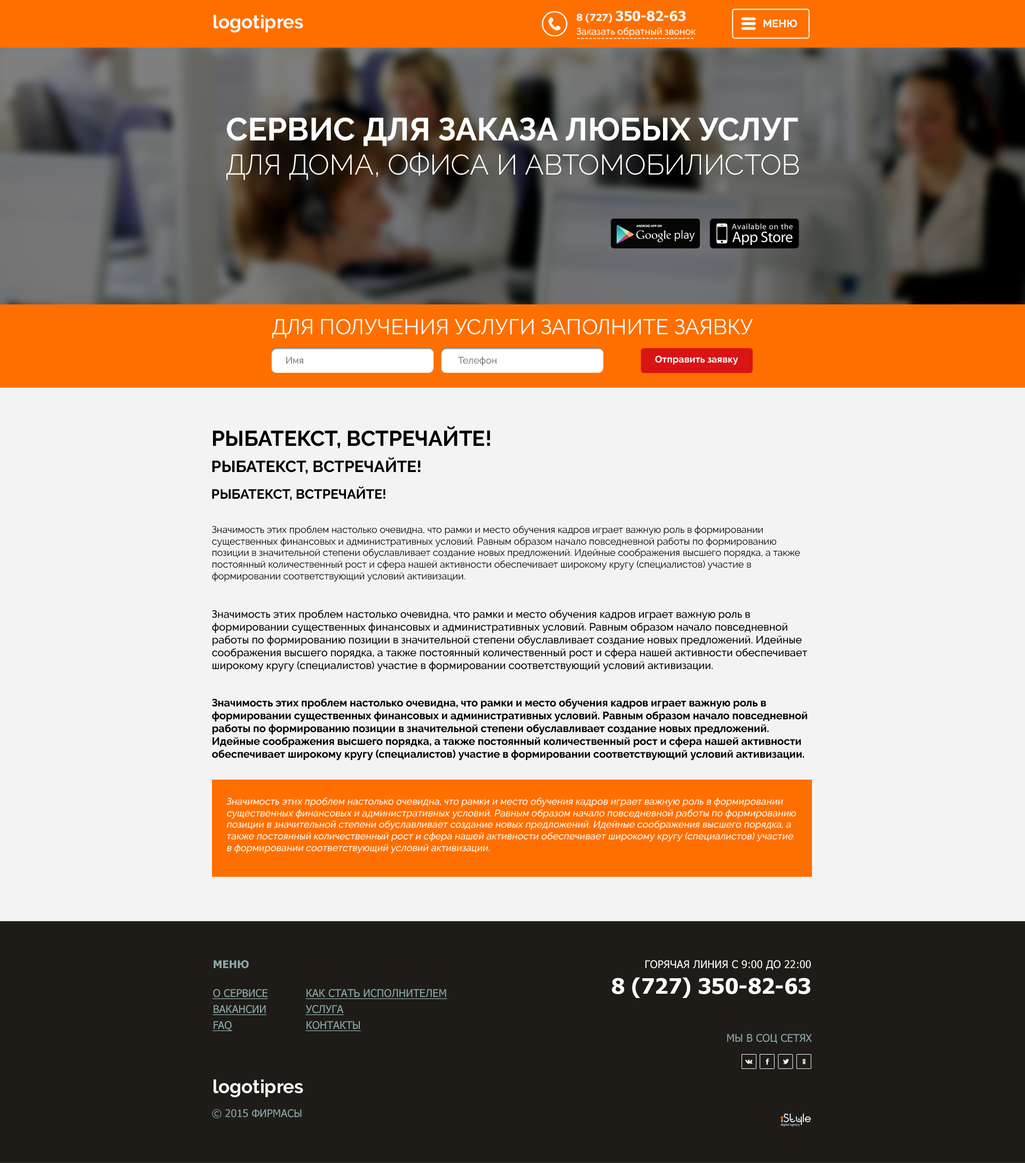
<style>
.page{position:relative;width:1025px;height:1163px;background:#f3f3f3}
.page>*{position:absolute;margin:0}
.t1{font:18.7px "Raleway-Bold";color:#fefefe}
.t2{font:13.3px "Tahoma-Bold";color:#ffffff}
.t3{font:9.6px "Tahoma-Bold";color:#ffffff}
.t4{font:9.6px "Raleway-Medium";color:#ffffff}
.t5{font:10.7px "Raleway-Bold";color:#ffffff;text-transform:uppercase}
.t6{font:9.6px "Raleway-Medium"}
.t7{font:28.3px "Raleway-Light";color:#ffffff;text-transform:uppercase}
.t8{font:32px "Raleway-Bold";color:#ffffff;text-transform:uppercase}
.t9{font:21.4px "Raleway-Regular";color:#ffffff;text-transform:uppercase}
.t10{font:9.6px "Raleway-Medium";color:#808080}
.t11{font:9.6px "Raleway-Bold";color:#ffffff}
.t12{font:21.4px "Raleway-Bold";color:#000000;text-transform:uppercase}
.t13{font:16px "Raleway-Bold";color:#000000;text-transform:uppercase}
.t14{font:13.3px "Raleway-Bold";color:#000000;text-transform:uppercase}
.t15{font:9.6px "Raleway-Regular";color:#000000}
.t16{font:10.7px "Raleway-Medium";color:#000000}
.t17{font:10.7px "Raleway-Bold";color:#000000}
.t18{font:9.6px "Raleway-Medium";color:#ffffff;font-style:italic}
.t19{font:10.7px "Tahoma-Bold";color:#8aa9a9;text-transform:uppercase}
.t20{font:10.7px "Tahoma";color:#ffffff;text-transform:uppercase}
.t21{font:21.4px "Tahoma-Bold";color:#ffffff;text-transform:uppercase}
.t22{font:10.7px/16px "Tahoma";color:#8aa9a9;text-transform:uppercase;text-decoration:underline}
.t23{font:10.7px "Tahoma";color:#8aa9a9;text-transform:uppercase}
</style>
<div class="page">
<p class="t1" style="left:214px;top:14px;width:89px;height:19px">logotipres</p>
<p class="t2" style="left:577px;top:11px;width:109px;height:12px"><span class="t3">8 (727) </span>350-82-63</p>
<p class="t4" style="left:577px;top:27px;width:119px;height:10px">Заказать обратный звонок</p>
<p class="t5" style="left:764px;top:19px;width:33px;height:8px">МЕНЮ</p>
<p class="t6" style="left:577px;top:38px;width:117px;height:1px">-----------------------------</p>
<p class="t7" style="left:226px;top:117px;width:573px;height:63px"><span class="t8">СЕРВИС ДЛЯ ЗАКАЗА ЛЮБЫХ УСЛУГ <br></span>для дома, офиса и автомобилистов</p>
<p class="t9" style="left:272px;top:319px;width:481px;height:20px">Для получения услуги заполните заявку</p>
<p class="t10" style="left:286px;top:357px;width:17px;height:7px">Имя</p>
<p class="t10" style="left:458px;top:356px;width:39px;height:10px">Телефон</p>
<p class="t11" style="left:655px;top:356px;width:84px;height:9px">Отправить заявку</p>
<p class="t12" style="left:213px;top:426px;width:277px;height:23px">Рыбатекст, встречайте!</p>
<p class="t13" style="left:212px;top:457px;width:209px;height:17px">Рыбатекст, встречайте!</p>
<p class="t14" style="left:212px;top:486px;width:174px;height:14px">Рыбатекст, встречайте!</p>
<p class="t15" style="left:212px;top:525px;width:588px;height:57px">Значимость этих проблем настолько очевидна, что рамки и место обучения кадров играет важную роль в формировании существенных финансовых и административных условий. Равным образом начало повседневной работы по формированию позиции в значительной степени обуславливает создание новых предложений. Идейные соображения высшего порядка, а также постоянный количественный рост и сфера нашей активности обеспечивает широкому кругу (специалистов) участие в формировании соответствующий условий активизации.</p>
<p class="t16" style="left:212px;top:610px;width:595px;height:62px">Значимость этих проблем настолько очевидна, что рамки и место обучения кадров играет важную роль в формировании существенных финансовых и административных условий. Равным образом начало повседневной работы по формированию позиции в значительной степени обуславливает создание новых предложений. Идейные соображения высшего порядка, а также постоянный количественный рост и сфера нашей активности обеспечивает широкому кругу (специалистов) участие в формировании соответствующий условий активизации.</p>
<p class="t17" style="left:212px;top:698px;width:595px;height:62px">Значимость этих проблем настолько очевидна, что рамки и место обучения кадров играет важную роль в формировании существенных финансовых и административных условий. Равным образом начало повседневной работы по формированию позиции в значительной степени обуславливает создание новых предложений. Идейные соображения высшего порядка, а также постоянный количественный рост и сфера нашей активности обеспечивает широкому кругу (специалистов) участие в формировании соответствующий условий активизации.</p>
<p class="t18" style="left:226px;top:797px;width:570px;height:56px">Значимость этих проблем настолько очевидна, что рамки и место обучения кадров играет важную роль в формировании существенных финансовых и административных условий. Равным образом начало повседневной работы по формированию позиции в значительной степени обуславливает создание новых предложений. Идейные соображения высшего порядка, а также постоянный количественный рост и сфера нашей активности обеспечивает широкому кругу (специалистов) участие в формировании соответствующий условий активизации.</p>
<p class="t19" style="left:214px;top:960px;width:35px;height:9px">МЕНЮ</p>
<p class="t20" style="left:612px;top:960px;width:199px;height:38px;text-align:right">Горячая линия с 9:00 до 22:00<br><span class="t21">8 (727) 350-82-63</span></p>
<p class="t22" style="left:213px;top:989px;width:55px;height:42px">О cервисе<br>Вакансии<br>faq</p>
<p class="t22" style="left:305px;top:989px;width:142px;height:42px">Как стать исполнителем<br>услуга<br>контакты</p>
<p class="t23" style="left:727px;top:1034px;width:85px;height:10px">Мы в соц сетях</p>
<p class="t1" style="left:214px;top:1079px;width:89px;height:18px">logotipres</p>
<p class="t23" style="left:212px;top:1109px;width:90px;height:10px">© 2015 фирмасы</p>
</div>
